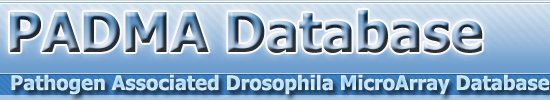
<style>
.page{position:relative;width:550px;height:100px}
.page>*{position:absolute;margin:0}
.t1{font:55px "Tahoma-Bold"}
.t2{font:20px "Tahoma-Bold";color:#c7e4f5}
</style>
<div class="page">
<p class="t1" style="left:10px;top:10px;width:473px;height:43px">PADMA Database</p>
<p class="t2" style="left:11px;top:74px;width:539px;height:21px">Pathogen Associated Drosophila MicroArray Database</p>
</div>
